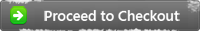
<style>
.page{position:relative;width:200px;height:31px}
.page>*{position:absolute;margin:0}
.t1{font:14.7px "SegoeUI-SemiBold";letter-spacing:-0.01em;color:#ffffff}
</style>
<div class="page">
<p class="t1" style="left:44px;top:10px;width:136px;height:11px">Proceed to Checkout</p>
</div>
